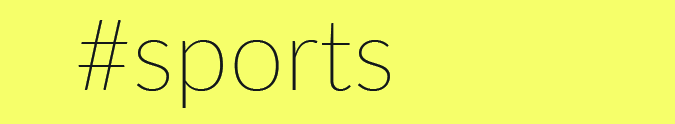
<style>
.page{position:relative;width:675px;height:124px;background:#f6ff6a}
.page>*{position:absolute;margin:0}
.t1{font:100px "Lato-Thin";color:#141819}
</style>
<div class="page">
<p class="t1" style="left:78px;top:20px;width:312px;height:88px">#sports</p>
</div>
